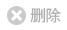
<style>
.page{position:relative;width:67px;height:30px;background:#ffffff}
.page>*{position:absolute;margin:0}
.t1{font:16px "SimHei";letter-spacing:-0.05em;color:#aeadad}
</style>
<div class="page">
<p class="t1" style="left:30px;top:7px;width:31px;height:16px">删除</p>
</div>
